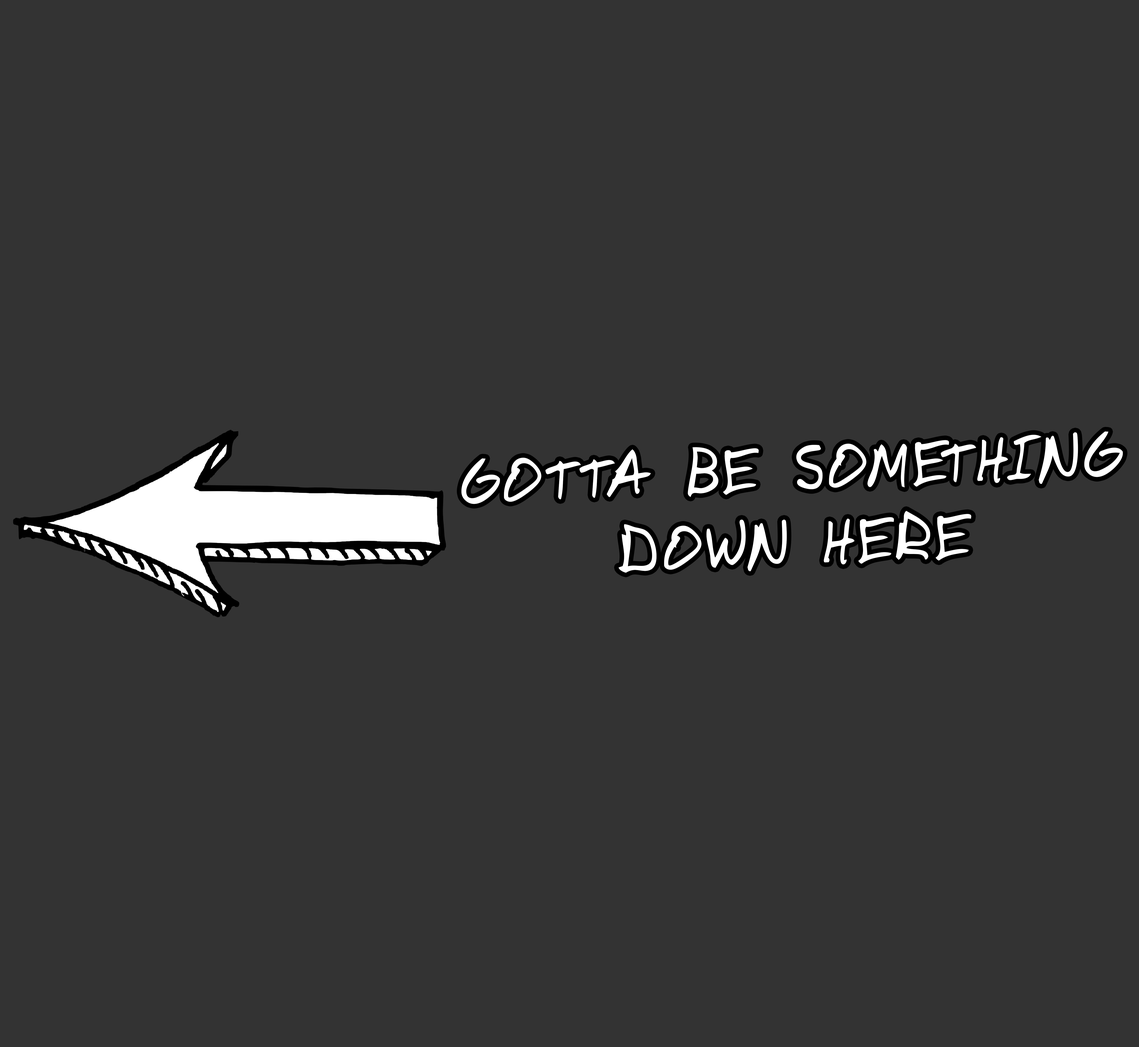
<style>
.page{position:relative;width:1139px;height:1047px;background:#333333}
.page>*{position:absolute;margin:0}
.t1{font:62.3px "DomesticManners";letter-spacing:0.04em;color:#ffffff}
</style>
<div class="page">
<p class="t1" style="left:461px;top:431px;width:661px;height:142px;text-align:center;rotate:-2deg">GOTTA BE SOMETHING<br>DOWN HERE</p>
</div>
